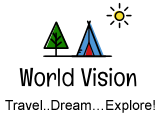
<style>
.page{position:relative;width:159px;height:117px;background:#ffffff}
.page>*{position:absolute;margin:0}
.t1{font:13.8px "ArialMT";letter-spacing:0.005em;color:#000000}
</style>
<div class="page">
<p class="t1" style="left:5px;top:100px;width:150px;height:13px">Travel..Dream…Explore!</p>
</div>
